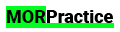
<style>
.page{position:relative;width:120px;height:32px;background:#ffffff}
.page>*{position:absolute;margin:0}
.t1{font:18px "Roboto-Black";color:#000000}
</style>
<div class="page">
<p class="t1" style="left:7px;top:10px;width:106px;height:13px">MORPractice</p>
</div>
